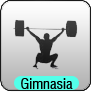
<style>
.page{position:relative;width:92px;height:92px}
.page>*{position:absolute;margin:0}
.t1{font:14.7px "Swiss721BT-RomanCondensed";color:#000000}
</style>
<div class="page">
<p class="t1" style="left:21px;top:78px;width:52px;height:11px">Gimnasia</p>
</div>
